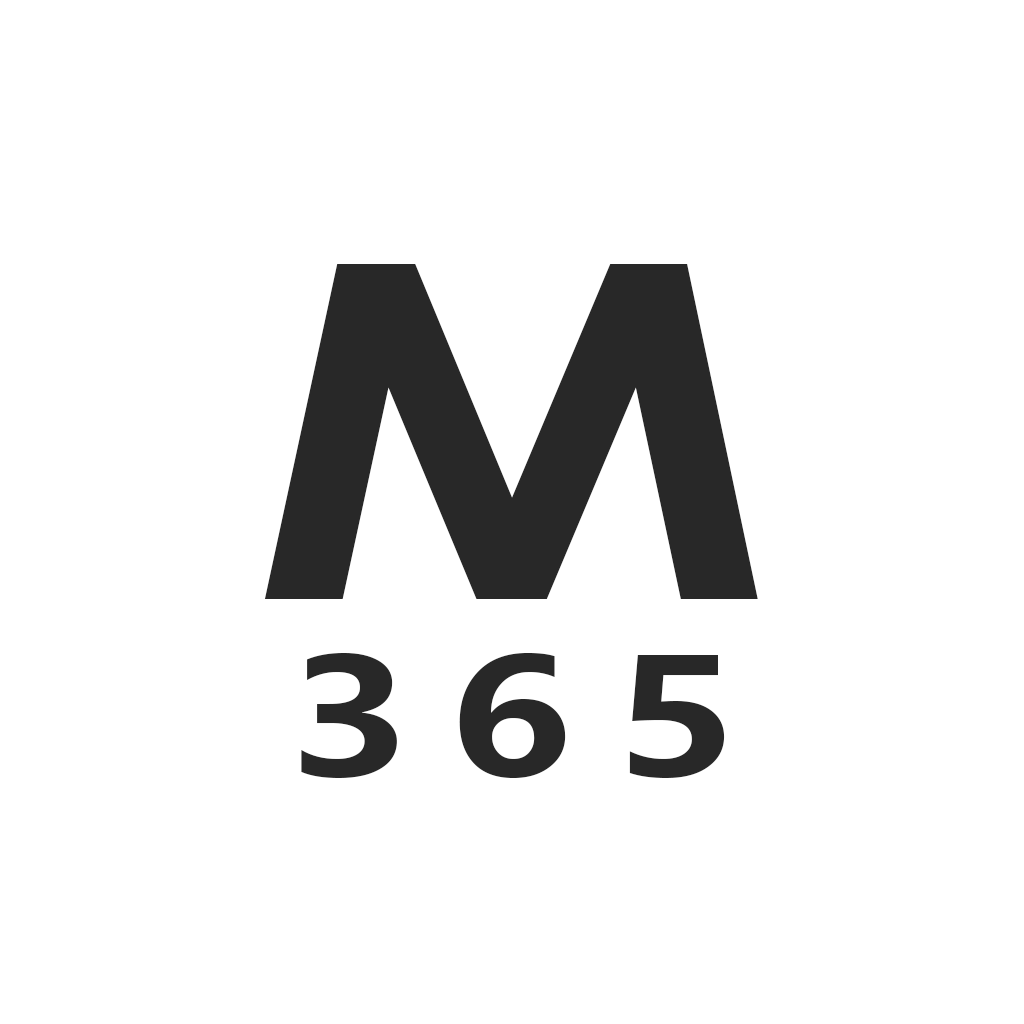
<style>
.page{position:relative;width:1024px;height:1024px;background:#ffffff}
.page>*{position:absolute;margin:0}
.t1{font:466.7px "CenturyGothic-Bold";color:#282828;scale:1.25 1}
.t2{font:160px "MicrosoftYaHei-Bold";letter-spacing:0.2em;color:#282828;scale:1.25 1}
</style>
<div class="page">
<p class="t1" style="left:264px;top:264px;width:494px;height:335px">M</p>
<p class="t2" style="left:301px;top:653px;width:424px;height:125px">365</p>
</div>
